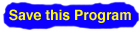
<style>
.page{position:relative;width:140px;height:32px;background:#0c00ff}
.page>*{position:absolute;margin:0}
.t1{font:14px "Helvetica-Bold";color:#fffc00}
</style>
<div class="page">
<p class="t1" style="left:9px;top:9px;width:122px;height:14px">Save this Program</p>
</div>
